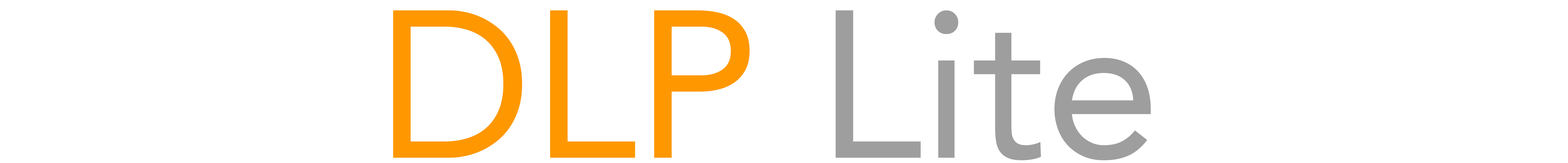
<style>
.page{position:relative;width:1568px;height:163px;background:#ffffff}
.page>*{position:absolute;margin:0}
.t1{font:208.2px "Avenir-Roman";color:#9e9e9e}
.t2{font:208.2px "Avenir-Roman";color:#ff9800}
</style>
<div class="page">
<p class="t1" style="left:393px;top:10px;width:758px;height:151px"><span class="t2">DLP </span>Lite</p>
</div>
